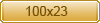
<style>
.page{position:relative;width:100px;height:23px}
.page>*{position:absolute;margin:0}
.t1{font:13px "ArialMT";color:#775100}
</style>
<div class="page">
<p class="t1" style="left:26px;top:6px;width:42px;height:10px">100x23</p>
</div>
